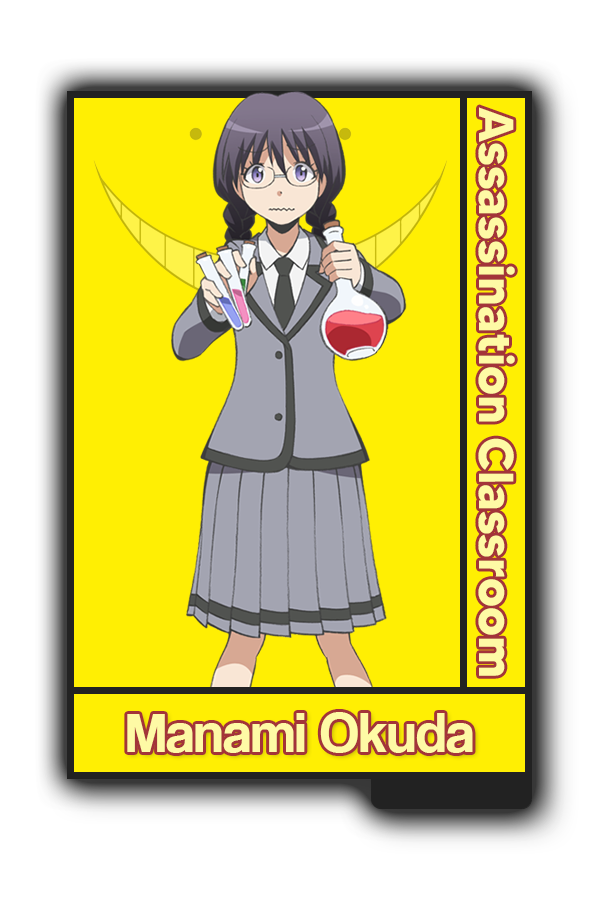
<style>
.page{position:relative;width:600px;height:900px;background:#ffef03}
.page>*{position:absolute;margin:0}
.t1{font:48.8px "MADETOMMY-Bold";color:#fefaa5}
.t2{font:57.8px "CoolveticaRg-Regular";color:#fefaa5}
</style>
<div class="page">
<p class="t1" style="left:478px;top:107px;width:37px;height:569px;rotate:90deg">Assassination Classroom</p>
<p class="t2" style="left:127px;top:712px;width:346px;height:41px">Manami Okuda</p>
</div>
